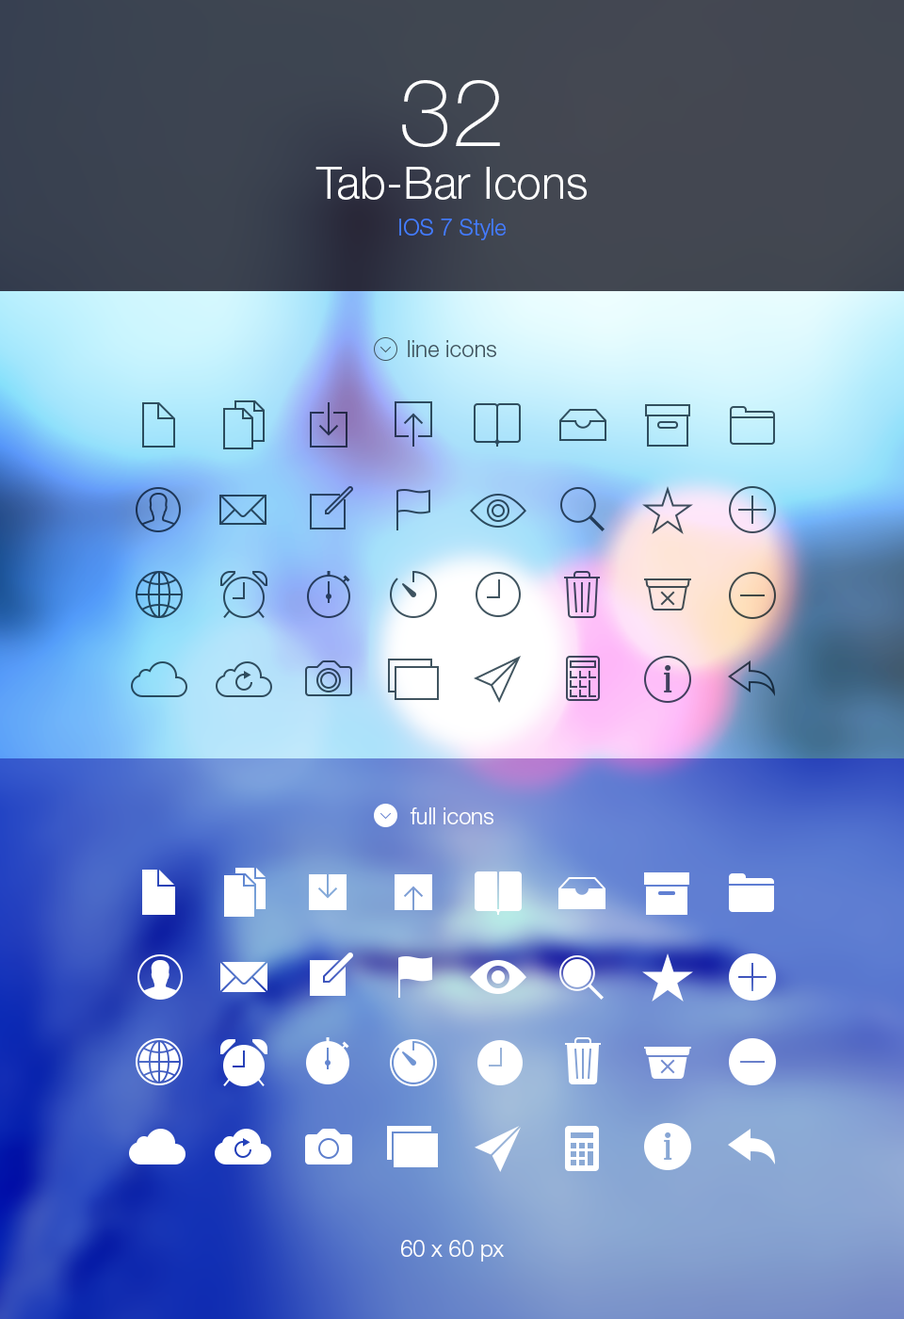
<style>
.page{position:relative;width:904px;height:1319px}
.page>*{position:absolute;margin:0}
.t1{font:45.2px/52.7px "HelveticaNeueLTStd-Lt";color:#ffffff}
.t2{font:94.2px/47.1px "HelveticaNeueLTStd-Th";color:#ffffff}
.t3{font:22.6px/36.7px "HelveticaNeueLTStd-Lt";color:#437cff}
.t4{font:22.6px "HelveticaNeueLTStd-Lt";color:#415560}
.t5{font:22.6px "HelveticaNeueLTStd-Lt";color:#ffffff}
</style>
<div class="page">
<p class="t1" style="left:316px;top:80px;width:271px;height:160px;text-align:center"><span class="t2">32<br></span>Tab-Bar Icons<br><span class="t3">IOS 7 Style</span></p>
<p class="t4" style="left:408px;top:340px;width:88px;height:17px">line icons</p>
<p class="t5" style="left:410px;top:807px;width:84px;height:17px">full icons</p>
<p class="t5" style="left:401px;top:1240px;width:103px;height:21px">60 x 60 px</p>
</div>
